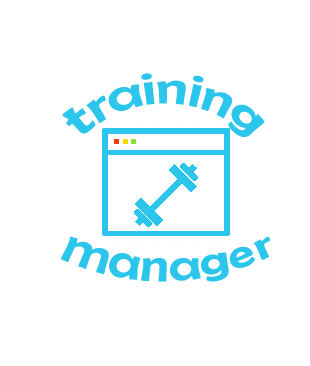
<style>
.page{position:relative;width:310px;height:366px;background:#ffffff}
.page>*{position:absolute;margin:0}
.t1{font:48px "BerlinSansFB-Reg";color:#2cc6ed}
</style>
<div class="page">
<p class="t1" style="left:62px;top:73px;width:203px;height:64px">training</p>
<p class="t1" style="left:61px;top:236px;width:210px;height:46px">manager</p>
</div>
